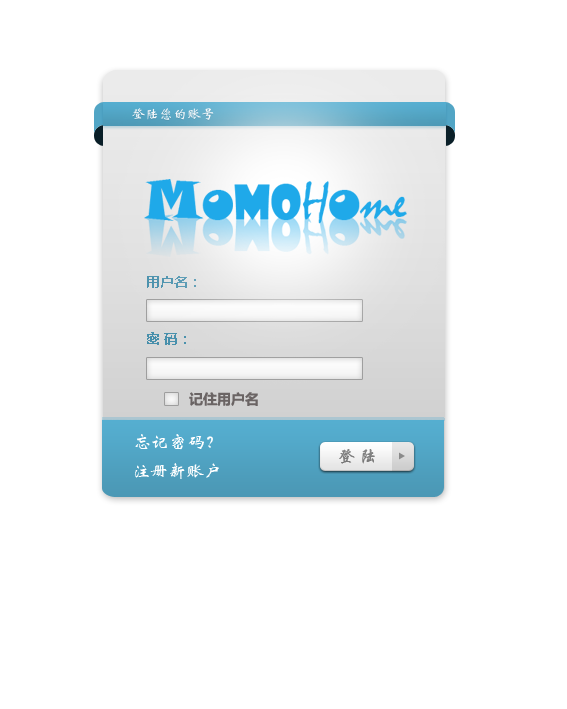
<style>
.page{position:relative;width:567px;height:709px;background:#ffffff}
.page>*{position:absolute;margin:0}
.t1{font:14px "MicrosoftYaHei-Bold";color:#478fab}
.t2{font:14px "MicrosoftYaHei-Bold";color:#6a6464}
.t3{font:18px "STXinwei";color:#ffffff}
.t4{font:18px "STXingkai";color:#7d7d7d}
</style>
<div class="page">
<p class="t1" style="left:147px;top:276px;width:49px;height:12px">用户名：</p>
<p class="t1" style="left:147px;top:332px;width:39px;height:13px">密 码：</p>
<p class="t2" style="left:189px;top:392px;width:69px;height:14px">记住用户名</p>
<p class="t3" style="left:135px;top:434px;width:78px;height:16px">忘记密码？</p>
<p class="t4" style="left:339px;top:449px;width:36px;height:15px">登 陆</p>
<p class="t3" style="left:134px;top:463px;width:85px;height:16px">注册新账户</p>
</div>
